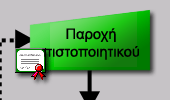
<style>
.page{position:relative;width:170px;height:100px;background:#c6c3c6}
.page>*{position:absolute;margin:0}
.t1{font:14.7px "ArialMT";color:#000000}
</style>
<div class="page">
<p class="t1" style="left:42px;top:28px;width:97px;height:32px;text-align:center">Παροχή<br>πιστοποιητικού</p>
</div>
